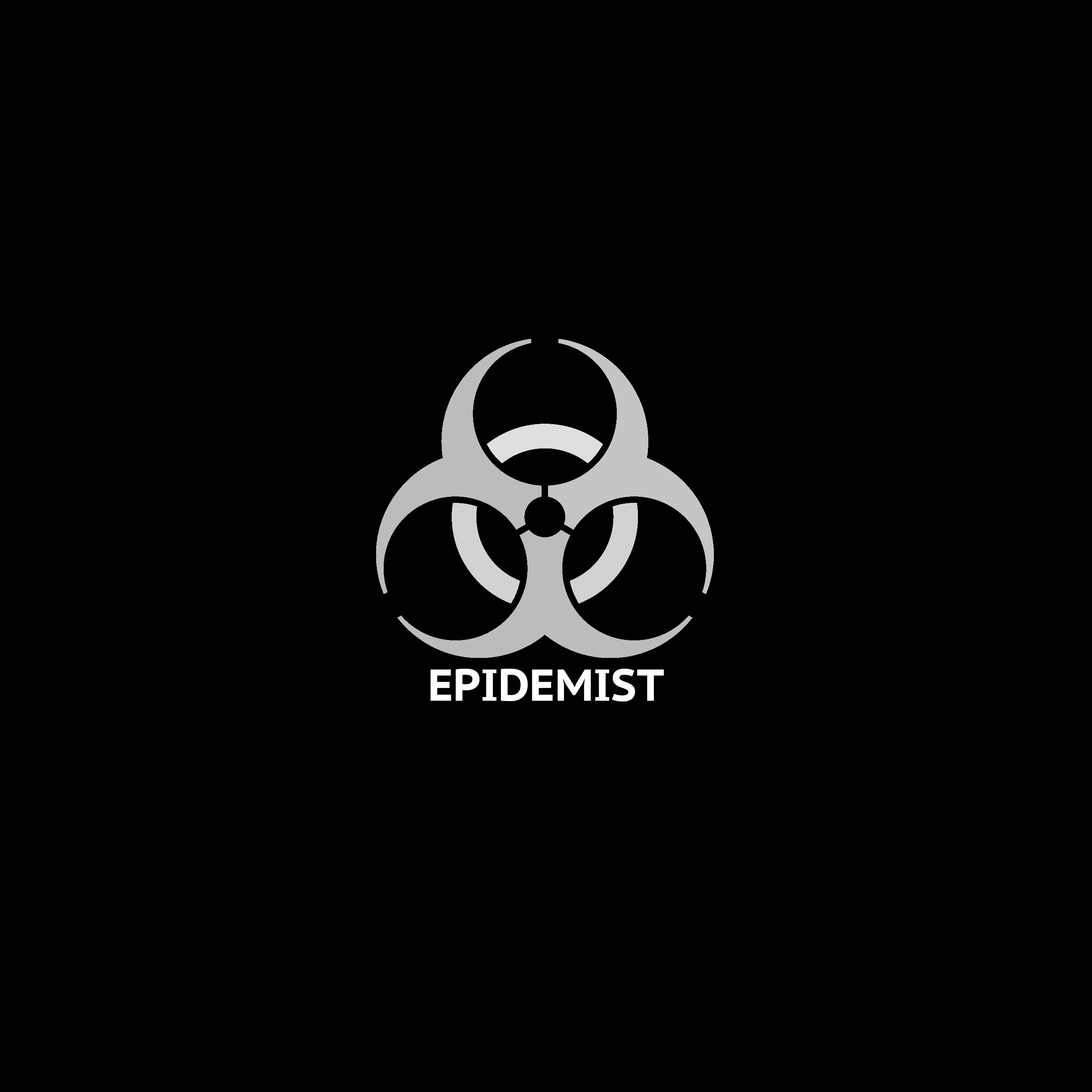
<style>
.page{position:relative;width:1092px;height:1092px;background:#010101}
.page>*{position:absolute;margin:0}
.t1{font:44.7px "PTSans-CaptionBold";color:#fffefe}
</style>
<div class="page">
<p class="t1" style="left:430px;top:669px;width:234px;height:32px">EPIDEMIST</p>
</div>
